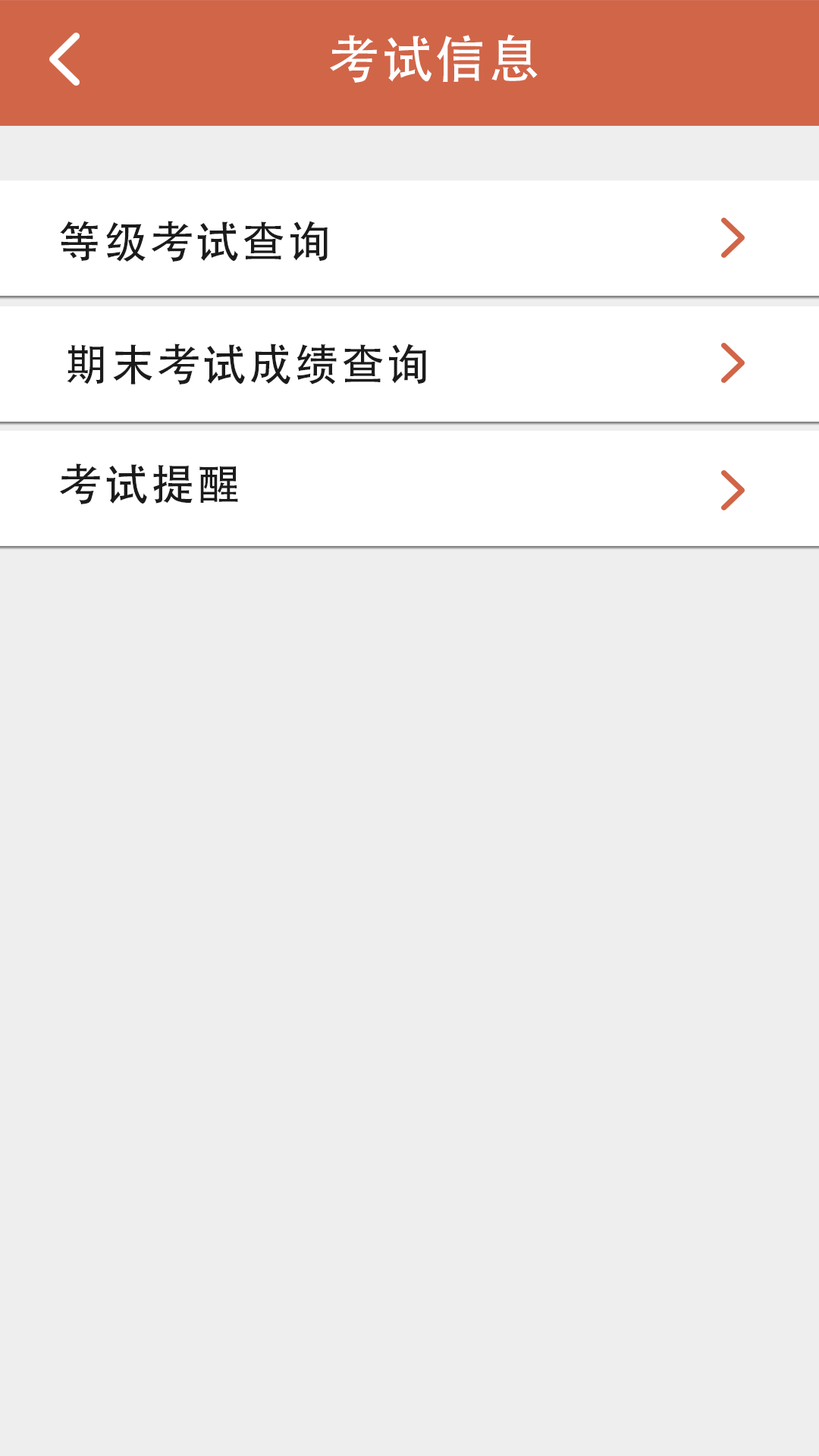
<style>
.page{position:relative;width:819px;height:1456px;background:#efeeee}
.page>*{position:absolute;margin:0}
.t1{font:50.8px "AdobeHeitiStd-Regular";letter-spacing:0.06em;color:#ffffff}
.t2{font:43.5px "AdobeHeitiStd-Regular";letter-spacing:0.06em;color:#1b1b1b}
</style>
<div class="page">
<p class="t1" style="left:330px;top:34px;width:208px;height:49px">考试信息</p>
<p class="t2" style="left:60px;top:221px;width:268px;height:41px">等级考试查询</p>
<p class="t2" style="left:67px;top:344px;width:359px;height:40px">期末考试成绩查询</p>
<p class="t2" style="left:59px;top:463px;width:179px;height:41px">考试提醒</p>
</div>
